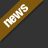
<style>
.page{position:relative;width:48px;height:48px;background:#333333}
.page>*{position:absolute;margin:0}
.t1{font:14px "HelveticaNeue-CondensedBold";letter-spacing:-0.02em;color:#ffffff}
</style>
<div class="page">
<p class="t1" style="left:3px;top:4px;width:26px;height:24px;rotate:-43deg">news</p>
</div>
